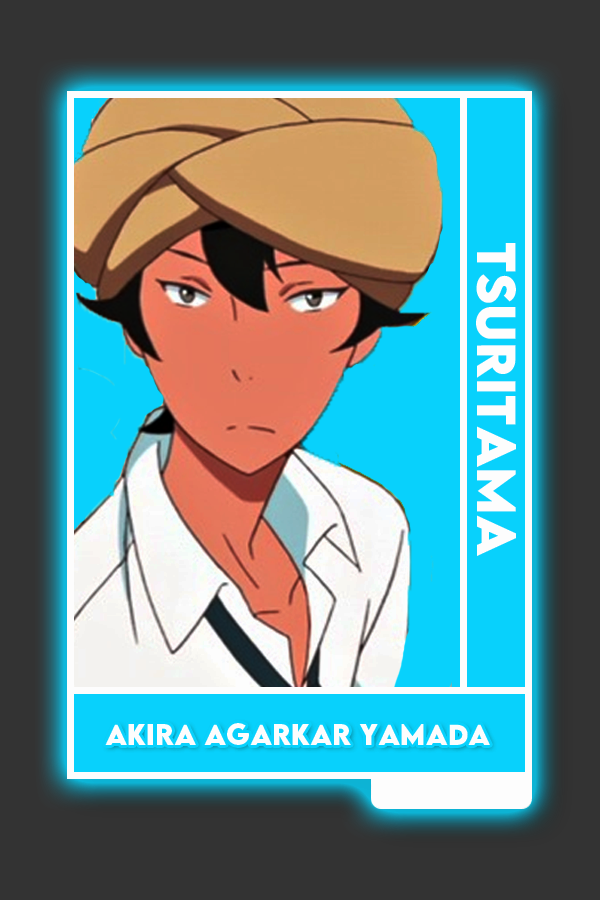
<style>
.page{position:relative;width:600px;height:900px;background:#333333}
.page>*{position:absolute;margin:0}
.t1{font:48.8px "LEMONMILK-Bold";color:#ffffff}
.t2{font:25.9px "LEMONMILK-Bold";color:#ffffff}
</style>
<div class="page">
<p class="t1" style="left:476px;top:243px;width:40px;height:313px;rotate:90deg">TSURITAMA</p>
<p class="t2" style="left:105px;top:723px;width:385px;height:22px">Akira Agarkar Yamada</p>
</div>
